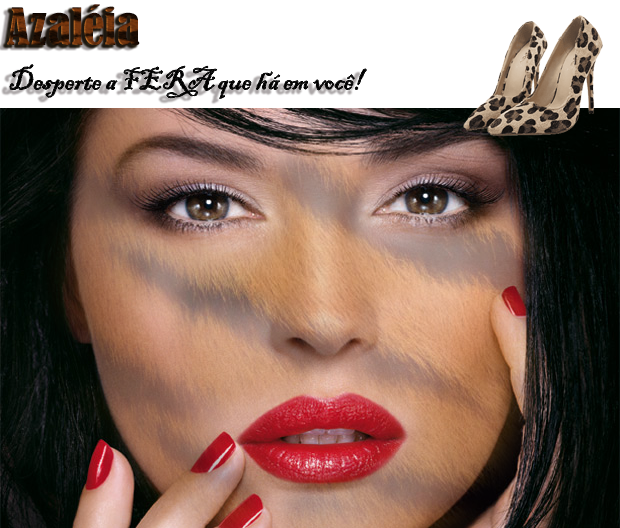
<style>
.page{position:relative;width:620px;height:528px}
.page>*{position:absolute;margin:0}
.t1{font:48px "BernardMT-Condensed"}
.t2{font:30px "BlackadderITC-Regular";color:#000000}
</style>
<div class="page">
<p class="t1" style="left:7px;top:4px;width:133px;height:42px">Azaléia</p>
<p class="t2" style="left:10px;top:64px;width:357px;height:35px">Desperte a FERA que há em você!</p>
</div>
